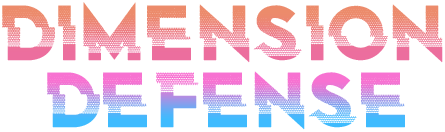
<style>
.page{position:relative;width:445px;height:132px;background:#ffffff}
.page>*{position:absolute;margin:0}
.t1{font:80px "Eclairages-Regular"}
</style>
<div class="page">
<p class="t1" style="left:2px;top:2px;width:441px;height:61px">Dimension</p>
<p class="t1" style="left:47px;top:71px;width:358px;height:59px">Defense</p>
</div>
